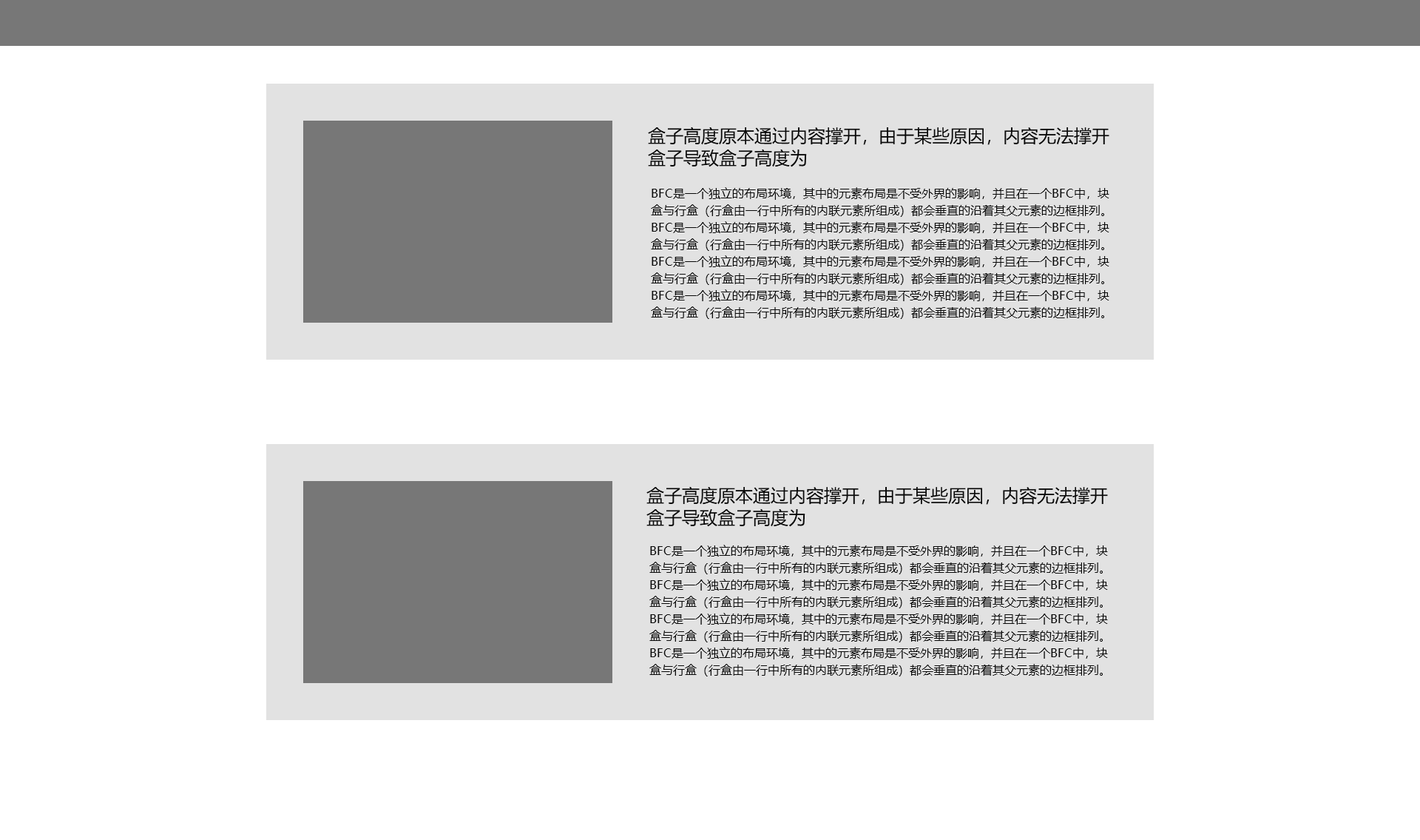
<style>
.page{position:relative;width:1420px;height:840px;background:#ffffff}
.page>*{position:absolute;margin:0}
.t1{font:17.8px/22.2px "MicrosoftYaHei";color:#090909}
.t2{font:11.8px/17px "MicrosoftYaHei";color:#090909}
</style>
<div class="page">
<p class="t1" style="left:648px;top:126px;width:462px;height:41px">盒子高度原本通过内容撑开，由于某些原因，内容无法撑开盒子导致盒子高度为</p>
<p class="t2" style="left:651px;top:187px;width:459px;height:132px">BFC是一个独立的布局环境，其中的元素布局是不受外界的影响，并且在一个BFC中，块盒与行盒（行盒由一行中所有的内联元素所组成）都会垂直的沿着其父元素的边框排列。BFC是一个独立的布局环境，其中的元素布局是不受外界的影响，并且在一个BFC中，块盒与行盒（行盒由一行中所有的内联元素所组成）都会垂直的沿着其父元素的边框排列。BFC是一个独立的布局环境，其中的元素布局是不受外界的影响，并且在一个BFC中，块盒与行盒（行盒由一行中所有的内联元素所组成）都会垂直的沿着其父元素的边框排列。BFC是一个独立的布局环境，其中的元素布局是不受外界的影响，并且在一个BFC中，块盒与行盒（行盒由一行中所有的内联元素所组成）都会垂直的沿着其父元素的边框排列。</p>
<p class="t1" style="left:647px;top:486px;width:461px;height:41px">盒子高度原本通过内容撑开，由于某些原因，内容无法撑开盒子导致盒子高度为</p>
<p class="t2" style="left:649px;top:544px;width:459px;height:132px">BFC是一个独立的布局环境，其中的元素布局是不受外界的影响，并且在一个BFC中，块盒与行盒（行盒由一行中所有的内联元素所组成）都会垂直的沿着其父元素的边框排列。BFC是一个独立的布局环境，其中的元素布局是不受外界的影响，并且在一个BFC中，块盒与行盒（行盒由一行中所有的内联元素所组成）都会垂直的沿着其父元素的边框排列。BFC是一个独立的布局环境，其中的元素布局是不受外界的影响，并且在一个BFC中，块盒与行盒（行盒由一行中所有的内联元素所组成）都会垂直的沿着其父元素的边框排列。BFC是一个独立的布局环境，其中的元素布局是不受外界的影响，并且在一个BFC中，块盒与行盒（行盒由一行中所有的内联元素所组成）都会垂直的沿着其父元素的边框排列。</p>
</div>
